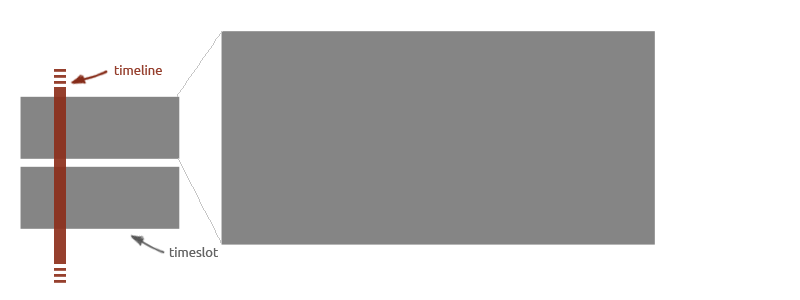
<style>
.page{position:relative;width:800px;height:300px;background:#ffffff}
.page>*{position:absolute;margin:0}
.t1{font:13px "Ubuntu";color:#8c2d19}
.t2{font:13px "Ubuntu";color:#555555}
</style>
<div class="page">
<p class="t1" style="left:114px;top:65px;width:48px;height:10px;opacity:0.91">timeline</p>
<p class="t2" style="left:169px;top:247px;width:49px;height:10px;opacity:0.91">timeslot</p>
</div>
